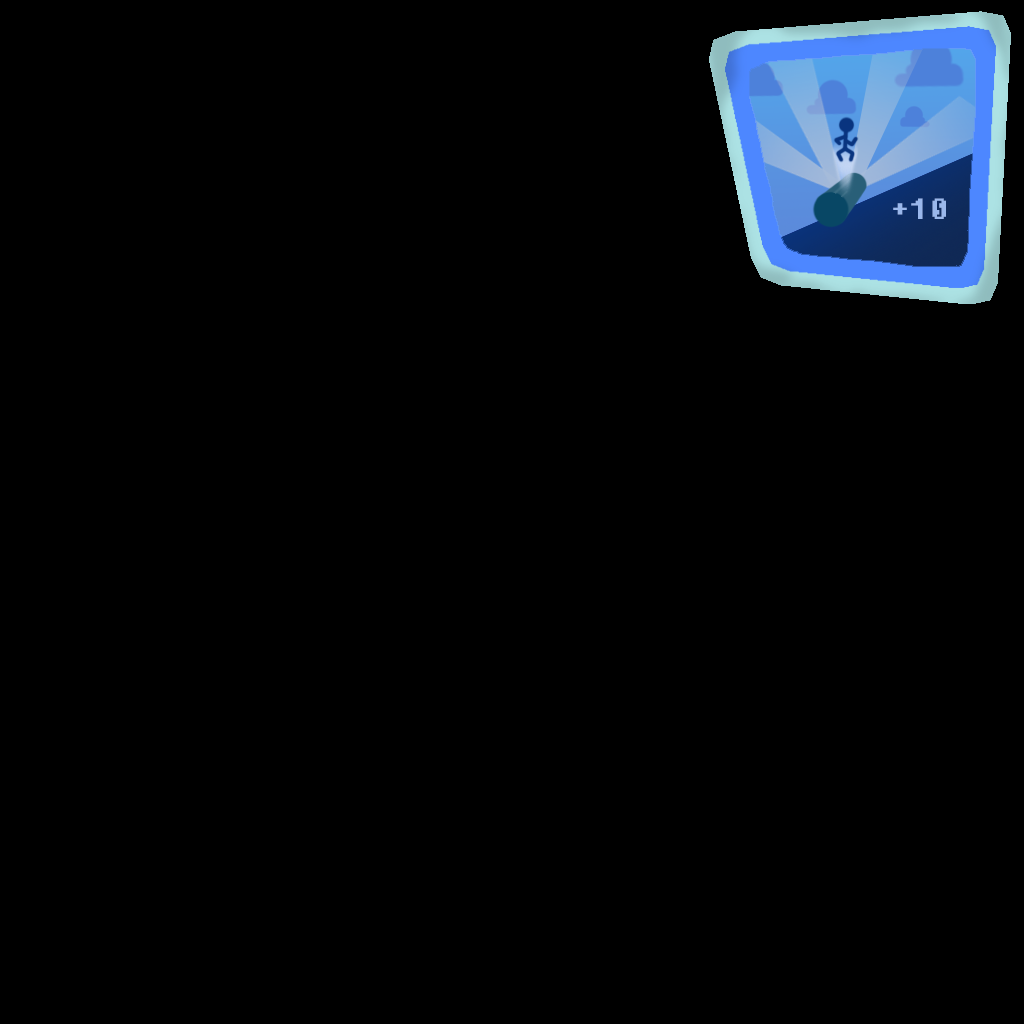
<style>
.page{position:relative;width:1024px;height:1024px;background:#000000}
.page>*{position:absolute;margin:0}
.t1{font:29px "Fixedsys";color:#9ab8ec}
</style>
<div class="page">
<p class="t1" style="left:893px;top:198px;width:53px;height:21px">+10</p>
</div>
